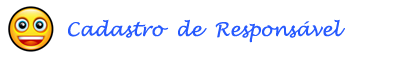
<style>
.page{position:relative;width:413px;height:59px;background:#ffffff}
.page>*{position:absolute;margin:0}
.t1{font:18.8px "LucidaHandwriting-Italic";color:#275afe}
</style>
<div class="page">
<p class="t1" style="left:68px;top:19px;width:277px;height:24px">Cadastro  de  Responsável</p>
</div>
